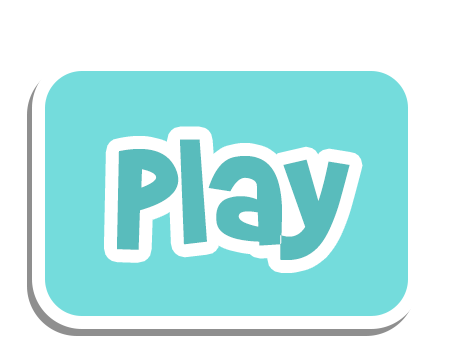
<style>
.page{position:relative;width:453px;height:361px;background:#ffffff}
.page>*{position:absolute;margin:0}
.t1{font:172px "BradyBunchRemastered";color:#59bcbc}
</style>
<div class="page">
<p class="t1" style="left:117px;top:139px;width:233px;height:121px">Play</p>
</div>
